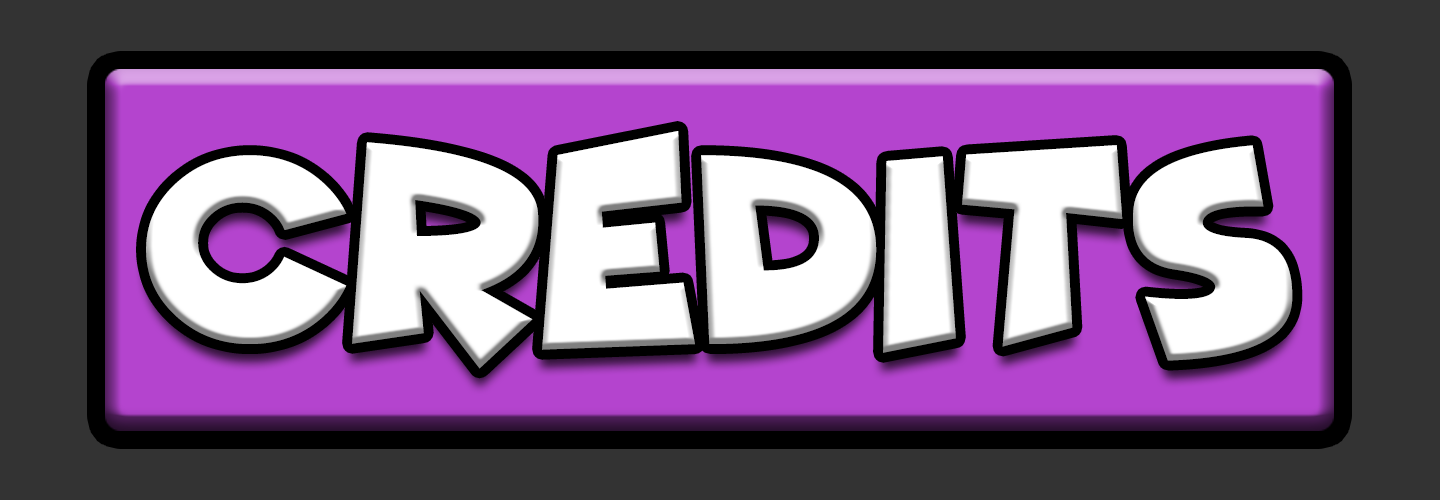
<style>
.page{position:relative;width:1440px;height:500px;background:#333333}
.page>*{position:absolute;margin:0}
.t1{font:275.9px "Funhouse";color:#ffffff;scale:0.95 1}
</style>
<div class="page">
<p class="t1" style="left:146px;top:131px;width:1147px;height:238px">CREDITS</p>
</div>
